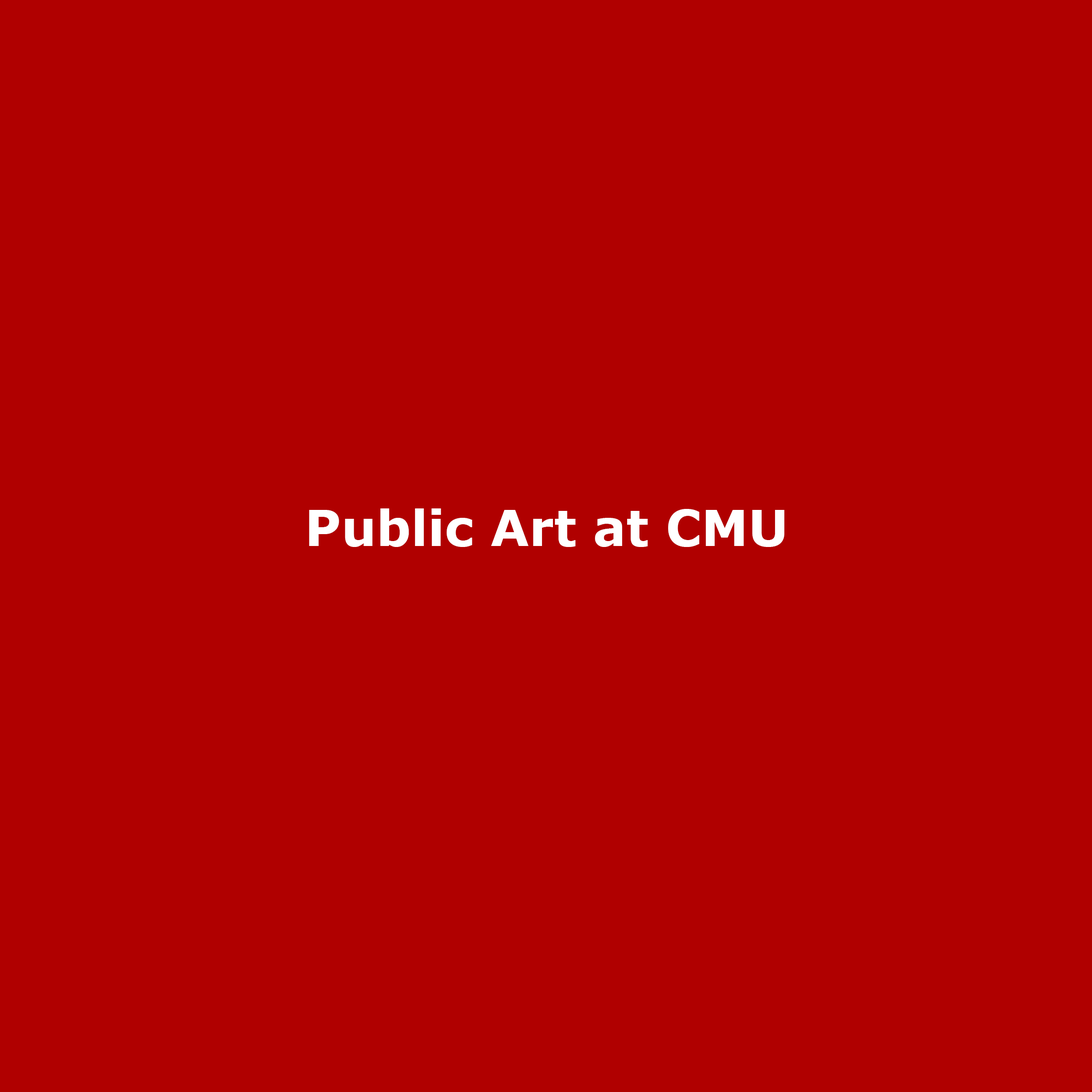
<style>
.page{position:relative;width:1092px;height:1092px;background:#b00000}
.page>*{position:absolute;margin:0}
.t1{font:49.5px "Verdana-Bold";color:#ffffff}
</style>
<div class="page">
<p class="t1" style="left:309px;top:508px;width:475px;height:39px">Public Art at CMU</p>
</div>
